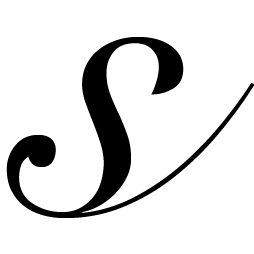
<style>
.page{position:relative;width:254px;height:254px;background:#ffffff}
.page>*{position:absolute;margin:0}
.t1{font:502px "SnellRoundhand";color:#000000}
</style>
<div class="page">
<p class="t1" style="left:6px;top:37px;width:249px;height:181px">s</p>
</div>
